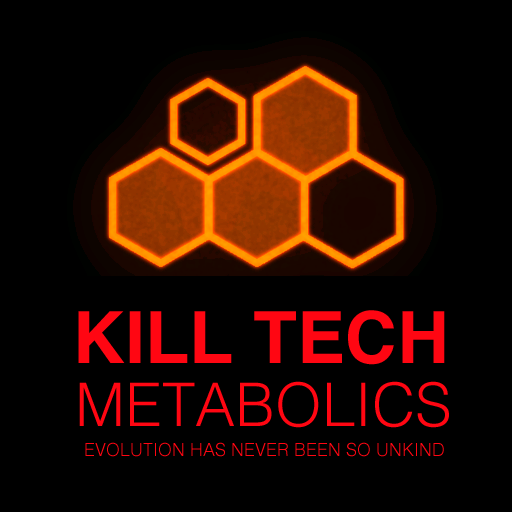
<style>
.page{position:relative;width:512px;height:512px;background:#000000}
.page>*{position:absolute;margin:0}
.t1{font:72px "Helvetica-Bold";color:#ff0612}
.t2{font:60px "Helvetica-Light";color:#ff0612}
.t3{font:18px "Helvetica-Light";color:#ff0612}
</style>
<div class="page">
<p class="t1" style="left:78px;top:310px;width:367px;height:55px">KILL TECH</p>
<p class="t2" style="left:79px;top:381px;width:370px;height:47px">METABOLICS</p>
<p class="t3" style="left:85px;top:442px;width:359px;height:15px">EVOLUTION HAS NEVER BEEN SO UNKIND</p>
</div>
